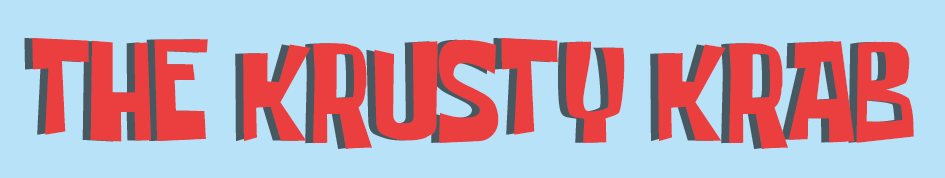
<style>
.page{position:relative;width:945px;height:178px;background:#b7e2f7}
.page>*{position:absolute;margin:0}
.t1{font:101.1px "SpongeboyRegular";color:#eb3f3f;scale:0.87 1}
</style>
<div class="page">
<p class="t1" style="left:32px;top:38px;width:882px;height:111px">THE KRUSTY KRAB</p>
</div>
